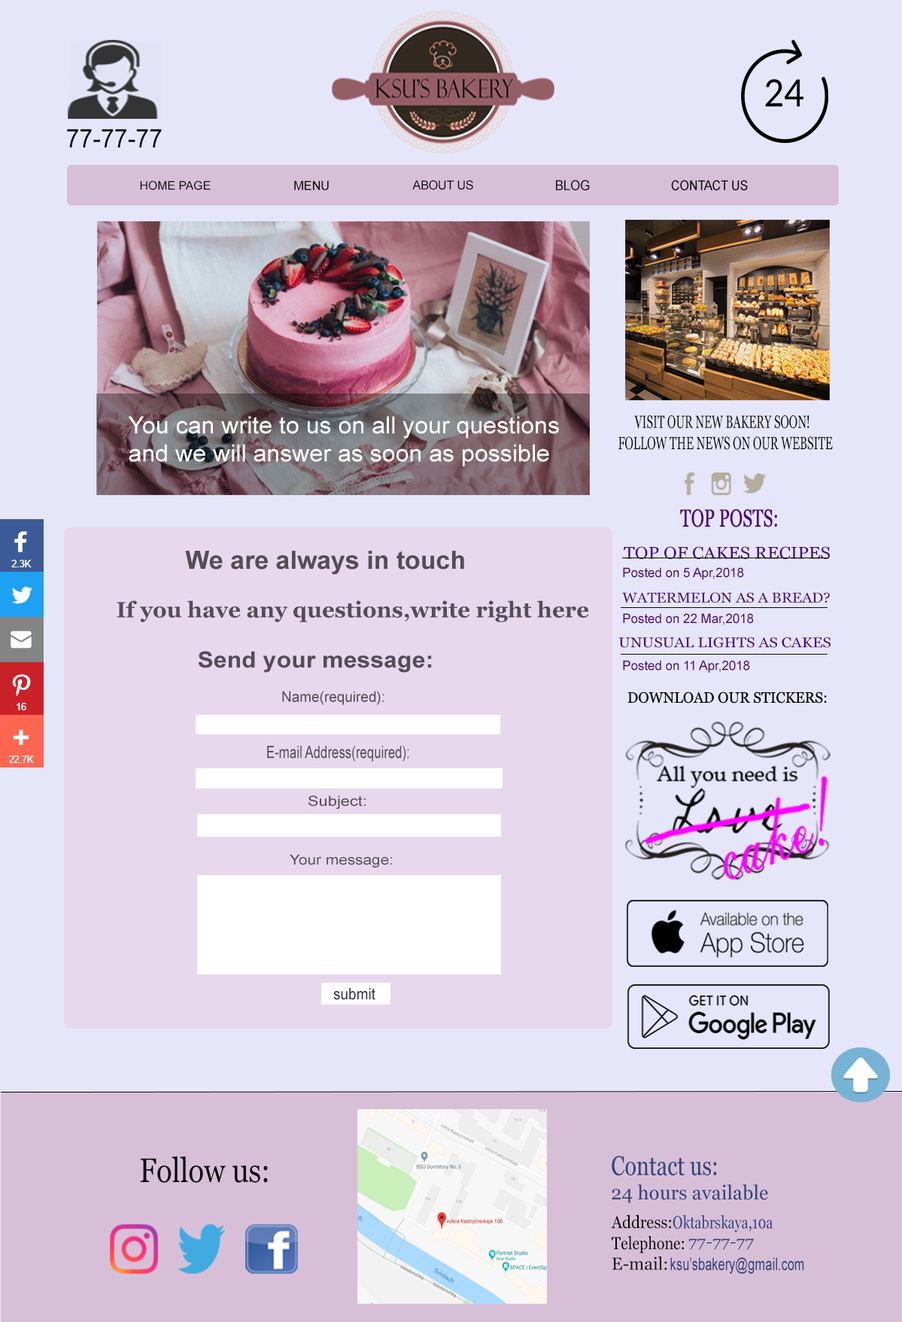
<style>
.page{position:relative;width:902px;height:1322px;background:#e6e6fa}
.page>*{position:absolute;margin:0}
.t1{font:25.9px "ArialMT";color:#050505;scale:0.93 1}
.t2{font:11.7px "ArialMT";color:#050505}
.t3{font:14.7px "ClarendonBT-Roman";color:#050505}
.t4{font:12.5px "ArialMT";color:#121212}
.t5{font:12.2px "ArialMT";color:#050505}
.t6{font:13.8px "ArialMT";color:#171717;scale:0.92 1}
.t7{font:13.6px "ArialMT";color:#080808;scale:0.88 1}
.t8{font:23.4px "ArialMT";color:#ffffff;scale:1.03 1}
.t9{font:17.6px "Georgia";color:#060606;text-transform:uppercase;scale:0.65 1}
.t10{font:24.4px "Georgia";color:#4b0082;text-transform:uppercase;scale:0.72 1}
.t11{font:25.2px "Arial-BoldMT";color:#534d55}
.t12{font:16.9px "Georgia";color:#4b0082;scale:1.07 1}
.t13{font:13.1px "ArialMT";color:#4b0082;scale:0.97 1}
.t14{font:13.1px "Gabriola";color:#4b0082;scale:0.97 1}
.t15{font:14.1px "Georgia";color:#4b0082;scale:1.07 1}
.t16{font:22px "Georgia-Bold";color:#534d55}
.t17{font:14.1px "Georgia";color:#4b0082;scale:1.1 1}
.t18{font:22.6px "Arial-BoldMT";color:#534d55;scale:1.07 1}
.t19{font:14.6px "ArialMT";color:#534d55}
.t20{font:15.1px "Georgia";color:#060606;text-transform:uppercase;scale:0.96 1}
.t21{font:17.2px "ArialMT";color:#534d55;scale:0.74 1}
.t22{font:14px "ArialMT";color:#534d55;scale:1.18 1}
.t23{font:14px "ArialMT";color:#534d55;scale:1.12 1}
.t24{font:15.9px "ArialMT";color:#383838;scale:0.9 1}
.t25{font:33.9px "Georgia";color:#080809;scale:0.85 1}
.t26{font:27.1px "Georgia";color:#33467d;scale:0.8 1}
.t27{font:19.6px "Georgia";color:#33467d}
.t28{font:17.3px "Georgia";color:#050505;scale:0.9 1}
.t29{font:17.3px "Georgia";color:#33467d;scale:0.79 1}
.t30{font:17.3px "Georgia";color:#050505;scale:0.86 1}
.t31{font:15px "Georgia";color:#33467d;scale:1.16 1}
.t32{font:17.3px "Georgia";color:#050505}
.t33{font:17.3px "ArialMT";color:#33467d;scale:0.72 1}
</style>
<div class="page">
<p class="t1" style="left:67px;top:129px;width:95px;height:18px">77-77-77</p>
<p class="t2" style="left:140px;top:181px;width:71px;height:9px"><span class="t3"> </span>HOME PAGE</p>
<p class="t4" style="left:294px;top:181px;width:35px;height:9px">MENU</p>
<p class="t5" style="left:412px;top:180px;width:61px;height:10px">ABOUT US</p>
<p class="t6" style="left:556px;top:180px;width:34px;height:10px">BLOG</p>
<p class="t7" style="left:671px;top:180px;width:77px;height:10px">CONTACT US</p>
<p class="t8" style="left:128px;top:416px;width:431px;height:50px">You can write to us on all your questions <br>and we will answer as soon as possible</p>
<p class="t9" style="left:618px;top:415px;width:215px;height:35px">Visit our new bakery soon!<br>Follow the news on our website</p>
<p class="t10" style="left:680px;top:509px;width:97px;height:18px">TOP POSTS:</p>
<p class="t11" style="left:185px;top:551px;width:279px;height:24px">We are always in touch</p>
<p class="t12" style="left:624px;top:546px;width:206px;height:13px">TOP OF CAKES RECIPES</p>
<p class="t13" style="left:623px;top:567px;width:121px;height:13px"><span class="t14"><br></span>Posted on 5 Apr,2018</p>
<p class="t15" style="left:622px;top:592px;width:208px;height:11px">WATERMELON AS A BREAD?</p>
<p class="t16" style="left:117px;top:600px;width:472px;height:22px">If you have any questions,write right here</p>
<p class="t13" style="left:623px;top:613px;width:131px;height:12px"><span class="t14"><br></span>Posted on 22 Mar,2018</p>
<p class="t17" style="left:618px;top:637px;width:213px;height:11px">UNUSUAL LIGHTS AS CAKES</p>
<p class="t18" style="left:198px;top:651px;width:234px;height:22px">Send your message:</p>
<p class="t13" style="left:623px;top:661px;width:127px;height:12px"><span class="t14"><br></span>Posted on 11 Apr,2018</p>
<p class="t19" style="left:282px;top:691px;width:102px;height:14px">Name(required):</p>
<p class="t20" style="left:627px;top:691px;width:200px;height:12px">Download our stickers:</p>
<p class="t21" style="left:267px;top:746px;width:142px;height:15px">E-mail Address(required):</p>
<p class="t22" style="left:308px;top:795px;width:58px;height:14px">Subject:</p>
<p class="t23" style="left:290px;top:854px;width:102px;height:13px">Your message:</p>
<p class="t24" style="left:333px;top:988px;width:42px;height:12px">submit</p>
<p class="t25" style="left:140px;top:1156px;width:128px;height:27px">Follow us:</p>
<p class="t26" style="left:612px;top:1156px;width:105px;height:20px">Contact us:</p>
<p class="t27" style="left:612px;top:1184px;width:156px;height:19px">24 hours available</p>
<p class="t28" style="left:611px;top:1214px;width:60px;height:15px">Address:</p>
<p class="t29" style="left:673px;top:1215px;width:100px;height:17px">Oktabrskaya,10a</p>
<p class="t30" style="left:612px;top:1235px;width:72px;height:18px">Telephone:</p>
<p class="t31" style="left:689px;top:1238px;width:65px;height:12px">77-77-77</p>
<p class="t32" style="left:612px;top:1256px;width:55px;height:14px">E-mail:</p>
<p class="t33" style="left:670px;top:1257px;width:134px;height:17px">ksu’sbakery@gmail.com</p>
</div>
